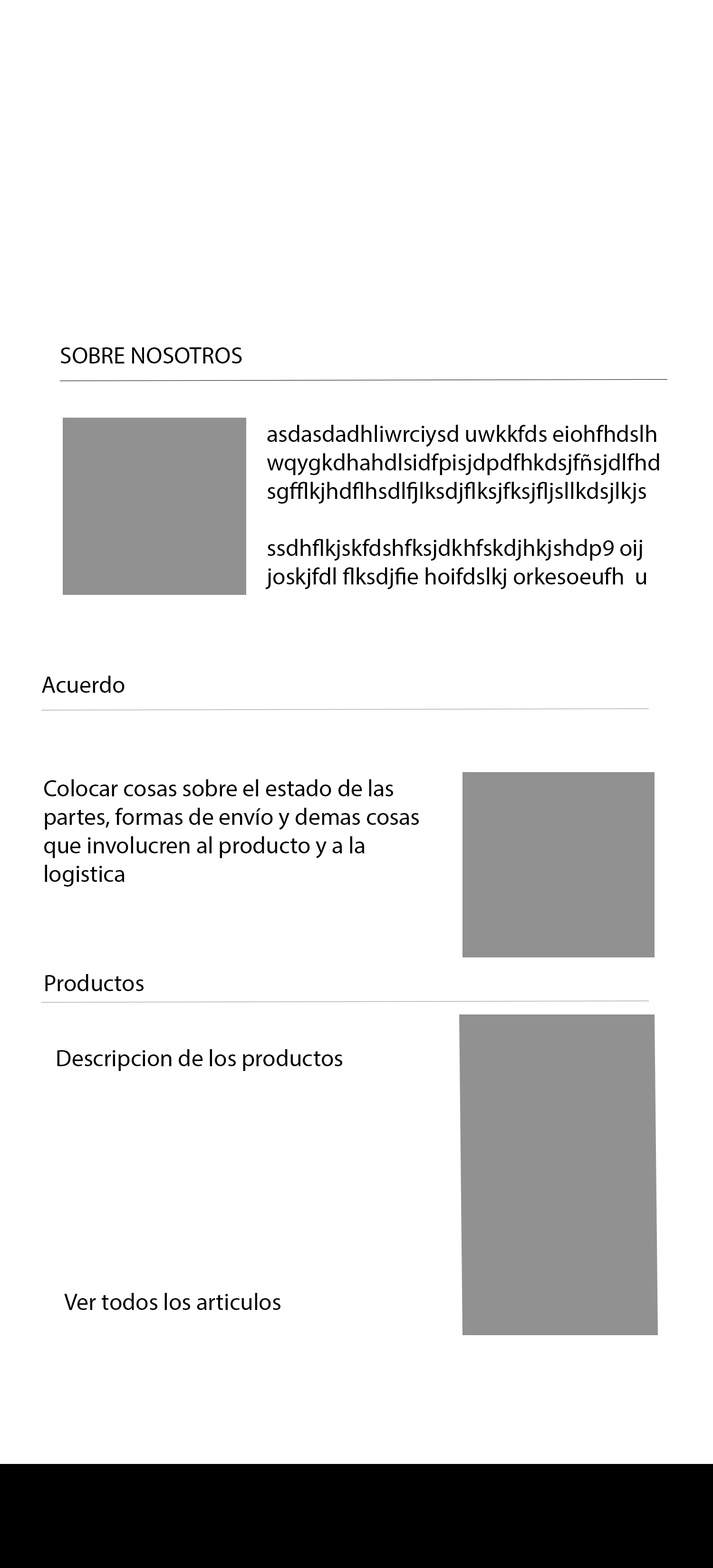
<style>
.page{position:relative;width:713px;height:1568px;background:#ffffff}
.page>*{position:absolute;margin:0}
.t1{font:23.8px "MyriadPro-Regular";color:#000000}
</style>
<div class="page">
<p class="t1" style="left:60px;top:347px;width:182px;height:16px">SOBRE NOSOTROS</p>
<p class="t1" style="left:265px;top:425px;width:394px;height:164px">asdasdadhliwrciysd uwkkfds eiohfhdslh<br>wqygkdhahdlsidfpisjdpdfhkdsjfñsjdlfhd<br>sgfflkjhdflhsdlfjlksdjflksjfksjfljsllkdsjlkjs<br><br>ssdhflkjskfdshfksjdkhfskdjhkjshdp9 oij<br>joskjfdl flksdjfie hoifdslkj orkesoeufh  u</p>
<p class="t1" style="left:42px;top:676px;width:82px;height:17px">Acuerdo</p>
<p class="t1" style="left:44px;top:779px;width:375px;height:108px">Colocar cosas sobre el estado de las <br>partes, formas de envío y demas cosas<br>que involucren al producto y a la <br>logistica</p>
<p class="t1" style="left:45px;top:974px;width:98px;height:17px">Productos</p>
<p class="t1" style="left:57px;top:1049px;width:285px;height:22px">Descripcion de los productos</p>
<p class="t1" style="left:64px;top:1293px;width:216px;height:17px">Ver todos los articulos</p>
</div>
